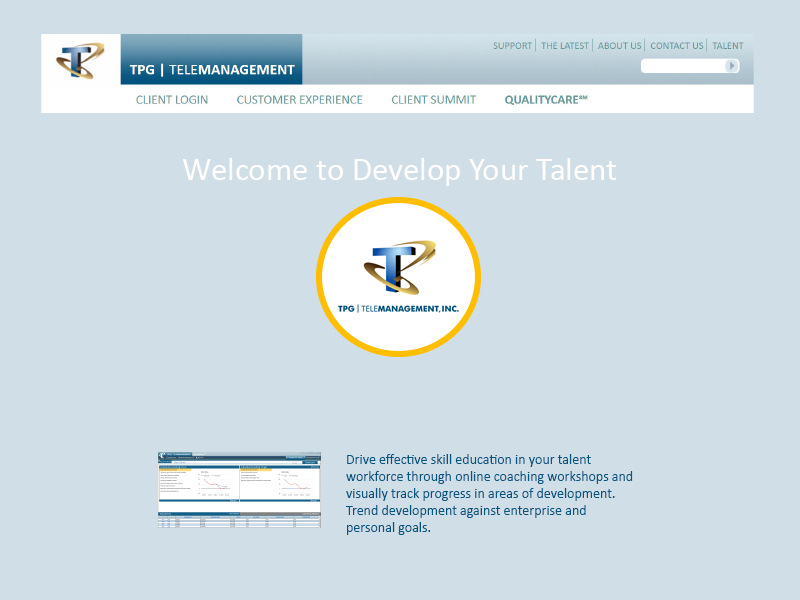
<style>
.page{position:relative;width:800px;height:600px;background:#d0dfe7}
.page>*{position:absolute;margin:0}
.t1{font:33px "Calibri";color:#fffefd}
.t2{font:14px "Calibri";color:#04557f}
</style>
<div class="page">
<p class="t1" style="left:183px;top:158px;width:433px;height:28px">Welcome to Develop Your Talent</p>
<p class="t2" style="left:346px;top:454px;width:287px;height:81px">Drive effective skill education in your talent workforce through online coaching workshops and visually track progress in areas of development. Trend development against enterprise and personal goals.</p>
</div>
